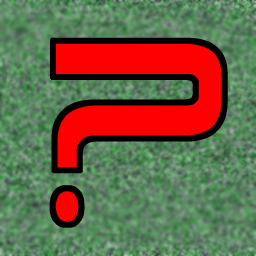
<style>
.page{position:relative;width:256px;height:256px}
.page>*{position:absolute;margin:0}
.t1{font:247.9px "VenusRising-Regular";color:#ff0000;scale:0.77 1}
</style>
<div class="page">
<p class="t1" style="left:52px;top:40px;width:173px;height:185px">?</p>
</div>
